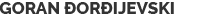
<style>
.page{position:relative;width:200px;height:16px;background:#ffffff}
.page>*{position:absolute;margin:0}
.t1{font:17px "Raleway-ExtraBold";color:#333333}
</style>
<div class="page">
<p class="t1" style="left:0px;top:2px;width:174px;height:12px">GORAN ĐORĐIJEVSKI</p>
</div>
